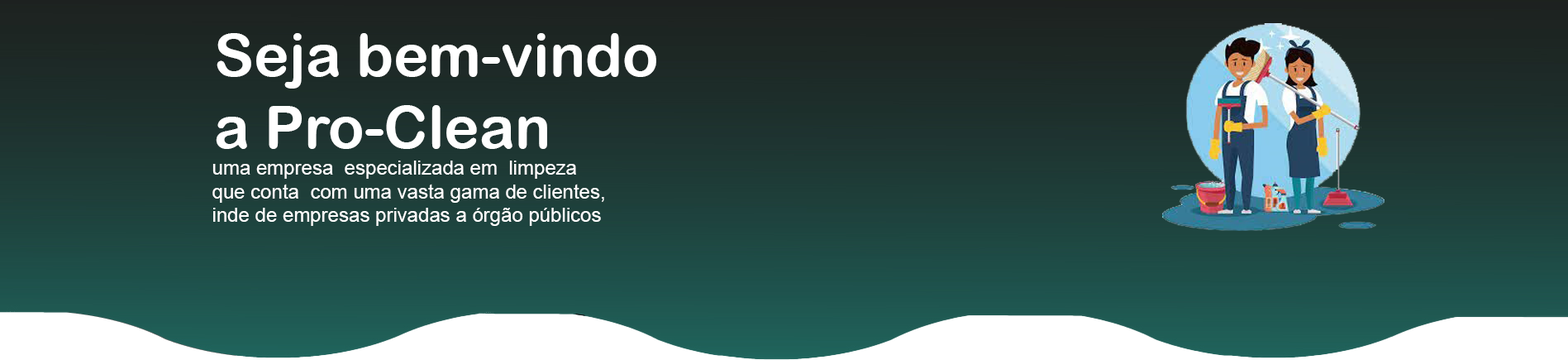
<style>
.page{position:relative;width:1568px;height:360px}
.page>*{position:absolute;margin:0}
.t1{font:59.5px "ArialRoundedMTBold";color:#ffffff}
.t2{font:19.8px "ArialMT";color:#ffffff}
</style>
<div class="page">
<p class="t1" style="left:216px;top:33px;width:440px;height:116px">Seja bem-vindo <br>a Pro-Clean</p>
<p class="t2" style="left:212px;top:160px;width:392px;height:66px">uma empresa  especializada em  limpeza<br>que conta  com uma vasta gama de clientes, <br>inde de empresas privadas a órgão públicos</p>
</div>
